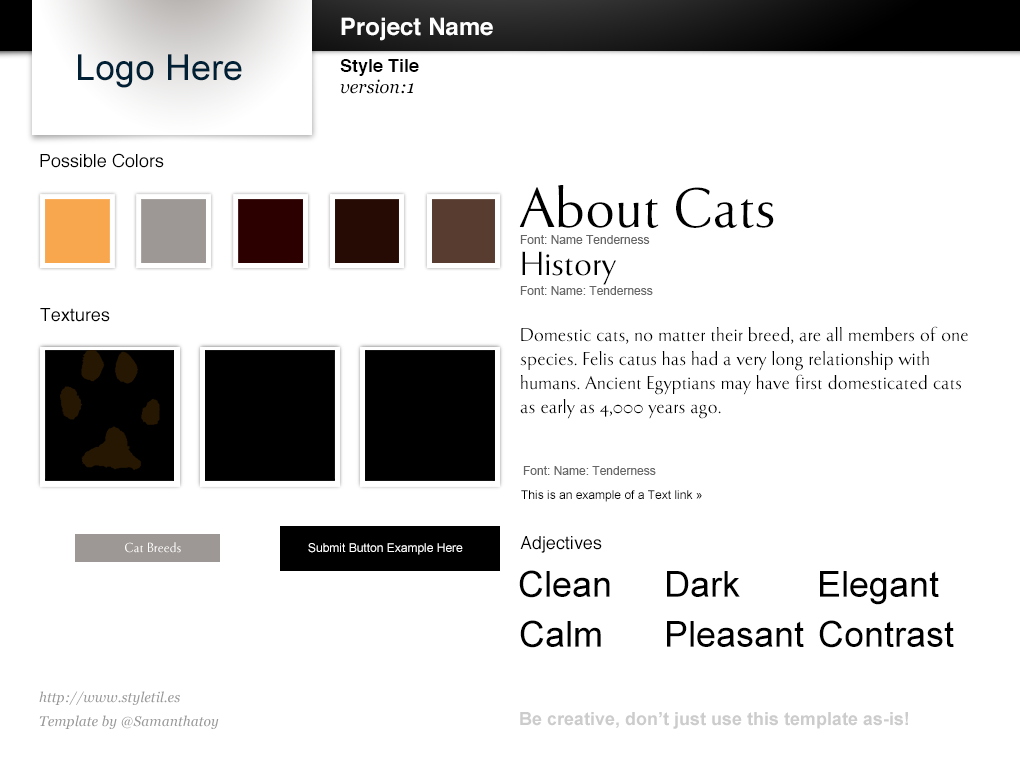
<style>
.page{position:relative;width:1020px;height:760px;background:#ffffff}
.page>*{position:absolute;margin:0}
.t1{font:24px "Helvetica-Bold";color:#ffffff}
.t2{font:36px "ArialMT";color:#002035}
.t3{font:18px "Helvetica-Bold";color:#000000}
.t4{font:18px "Georgia-Italic";color:#000000}
.t5{font:18px "Helvetica";color:#000000}
.t6{font:60px/24px "Tenderness";color:#000000}
.t7{font:36px/24px "Tenderness";color:#000000}
.t8{font:12px "ArialMT";color:#666666}
.t9{font:20px/24px "Tenderness";color:#000000}
.t10{font:12px "ArialMT";color:#000000}
.t11{font:14px "Tenderness";color:#ffffff}
.t12{font:12px "ArialMT";color:#ffffff}
.t13{font:36px "ArialMT";color:#000000}
.t14{font:14px/24px "Georgia-Italic";color:#999999}
.t15{font:18px "Arial-BoldMT";color:#cccccc}
</style>
<div class="page">
<p class="t1" style="left:341px;top:17px;width:152px;height:24px">Project Name</p>
<p class="t2" style="left:78px;top:54px;width:164px;height:34px">Logo Here</p>
<p class="t3" style="left:340px;top:59px;width:79px;height:17px">Style Tile</p>
<p class="t4" style="left:340px;top:79px;width:74px;height:15px">version:1</p>
<p class="t5" style="left:40px;top:153px;width:124px;height:15px">Possible Colors</p>
<p class="t6" style="left:519px;top:185px;width:255px;height:100px">About Cats<br><br><span class="t7">History</span></p>
<p class="t8" style="left:520px;top:235px;width:130px;height:9px">Font: Name Tenderness</p>
<p class="t8" style="left:520px;top:286px;width:133px;height:9px">Font: Name: Tenderness</p>
<p class="t5" style="left:40px;top:308px;width:70px;height:14px">Textures</p>
<p class="t9" style="left:520px;top:326px;width:448px;height:93px">Domestic cats, no matter their breed, are all members of one species. Felis catus has had a very long relationship with humans. Ancient Egyptians may have first domesticated cats as early as 4,000 years ago.</p>
<p class="t8" style="left:523px;top:466px;width:133px;height:9px">Font: Name: Tenderness</p>
<p class="t10" style="left:521px;top:490px;width:181px;height:12px">This is an example of a Text link »</p>
<p class="t11" style="left:125px;top:542px;width:56px;height:11px">Cat Breeds</p>
<p class="t12" style="left:308px;top:543px;width:155px;height:12px">Submit Button Example Here</p>
<p class="t5" style="left:520px;top:536px;width:82px;height:17px">Adjectives</p>
<p class="t13" style="left:519px;top:570px;width:91px;height:28px">Clean</p>
<p class="t13" style="left:667px;top:571px;width:73px;height:26px">Dark</p>
<p class="t13" style="left:820px;top:571px;width:119px;height:34px">Elegant</p>
<p class="t13" style="left:520px;top:620px;width:81px;height:28px">Calm</p>
<p class="t13" style="left:667px;top:621px;width:137px;height:26px">Pleasant</p>
<p class="t13" style="left:819px;top:620px;width:135px;height:28px">Contrast</p>
<p class="t14" style="left:39px;top:691px;width:180px;height:38px">http://www.styletil.es<br>Template by @Samanthatoy</p>
<p class="t15" style="left:520px;top:712px;width:388px;height:17px">Be creative, don’t just use this template as-is!</p>
</div>
